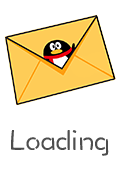
<style>
.page{position:relative;width:120px;height:180px;background:#ffffff}
.page>*{position:absolute;margin:0}
.t1{font:30px "DFWaWaSC-W5";color:#4d4d4d}
</style>
<div class="page">
<p class="t1" style="left:11px;top:130px;width:98px;height:26px">Loading</p>
</div>
